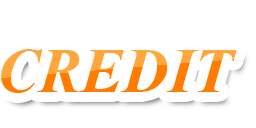
<style>
.page{position:relative;width:256px;height:128px;background:#ffffff}
.page>*{position:absolute;margin:0}
.t1{font:63px "TimesNewRomanPS-BoldItalicMT"}
</style>
<div class="page">
<p class="t1" style="left:1px;top:49px;width:236px;height:44px">CREDIT</p>
</div>
